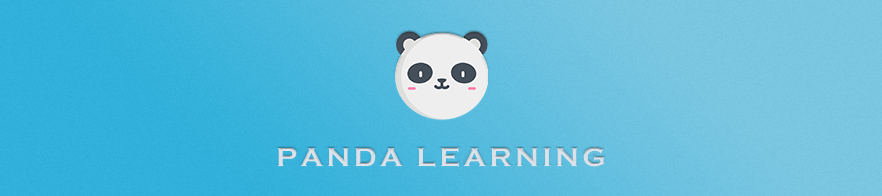
<style>
.page{position:relative;width:882px;height:196px}
.page>*{position:absolute;margin:0}
.t1{font:27px "CopperplateGothic-Bold";letter-spacing:0.14em;color:#dce3ea}
</style>
<div class="page">
<p class="t1" style="left:278px;top:147px;width:327px;height:20px">PANDA LEARNING</p>
</div>
